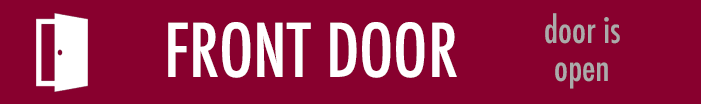
<style>
.page{position:relative;width:701px;height:104px;background:#88002e}
.page>*{position:absolute;margin:0}
.t1{font:36px/38px "Futura-CondensedMedium";color:#ababab}
.t2{font:72px "Futura-CondensedMedium";color:#ffffff}
</style>
<div class="page">
<p class="t1" style="left:545px;top:13px;width:75px;height:76px;text-align:center">door is<br>open</p>
<p class="t2" style="left:168px;top:22px;width:289px;height:56px">FRONT DOOR</p>
</div>
